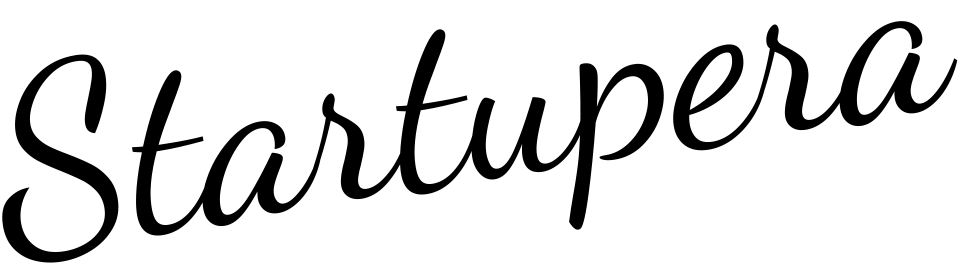
<style>
.page{position:relative;width:962px;height:272px;background:#ffffff}
.page>*{position:absolute;margin:0}
.t1{font:250px "DancingScript-Regular";color:#000000}
</style>
<div class="page">
<p class="t1" style="left:2px;top:21px;width:956px;height:242px;rotate:-9deg">Startupera</p>
</div>
